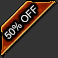
<style>
.page{position:relative;width:58px;height:58px;background:#333333}
.page>*{position:absolute;margin:0}
.t1{font:10px "ArialMT";color:#ffffff}
</style>
<div class="page">
<p class="t1" style="left:4px;top:5px;width:32px;height:34px;rotate:-45deg">50% OFF</p>
</div>
